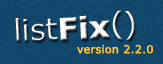
<style>
.page{position:relative;width:163px;height:64px}
.page>*{position:absolute;margin:0}
.t1{font:30.1px "Verdana";color:#ffffff}
.t2{font:30.1px "Verdana-Bold";color:#ffffff;font-weight:bold}
.t3{font:11px "Verdana";color:#ffc337;font-weight:bold}
</style>
<div class="page">
<p class="t1" style="left:15px;top:10px;width:120px;height:31px;rotate:-3deg">list<span class="t2">Fix</span>()</p>
<p class="t3" style="left:77px;top:44px;width:76px;height:10px">version 2.2.0</p>
</div>
